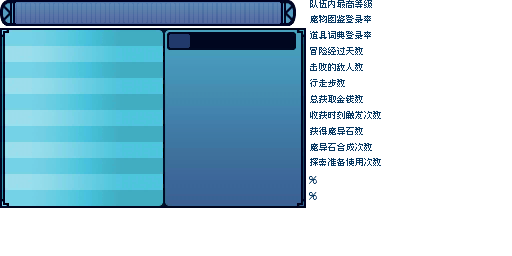
<style>
.page{position:relative;width:512px;height:256px;background:#ffffff}
.page>*{position:absolute;margin:0}
.t1{font:8.7px/16px "Zfull-GB";letter-spacing:0.105em;color:#063761}
.t2{font:8.7px/14.7px "Zfull-GB";letter-spacing:0.105em;color:#063761}
.t3{font:8.7px/15.3px "Zfull-GB";letter-spacing:0.105em;color:#063761}
</style>
<div class="page">
<p class="t1" style="left:310px;top:0px;width:71px;height:166px"><span class="t2">队伍内最高等级<br></span>魔物图鉴登录率<br>道具词典登录率<br>冒险经过天数<br>击败的敌人数<br>行走步数<br>总获取金钱数<br>收获时刻触发次数<br>获得魔导石数<br><span class="t3">魔导石合成次数<br>探索准备使用次数</span></p>
</div>
